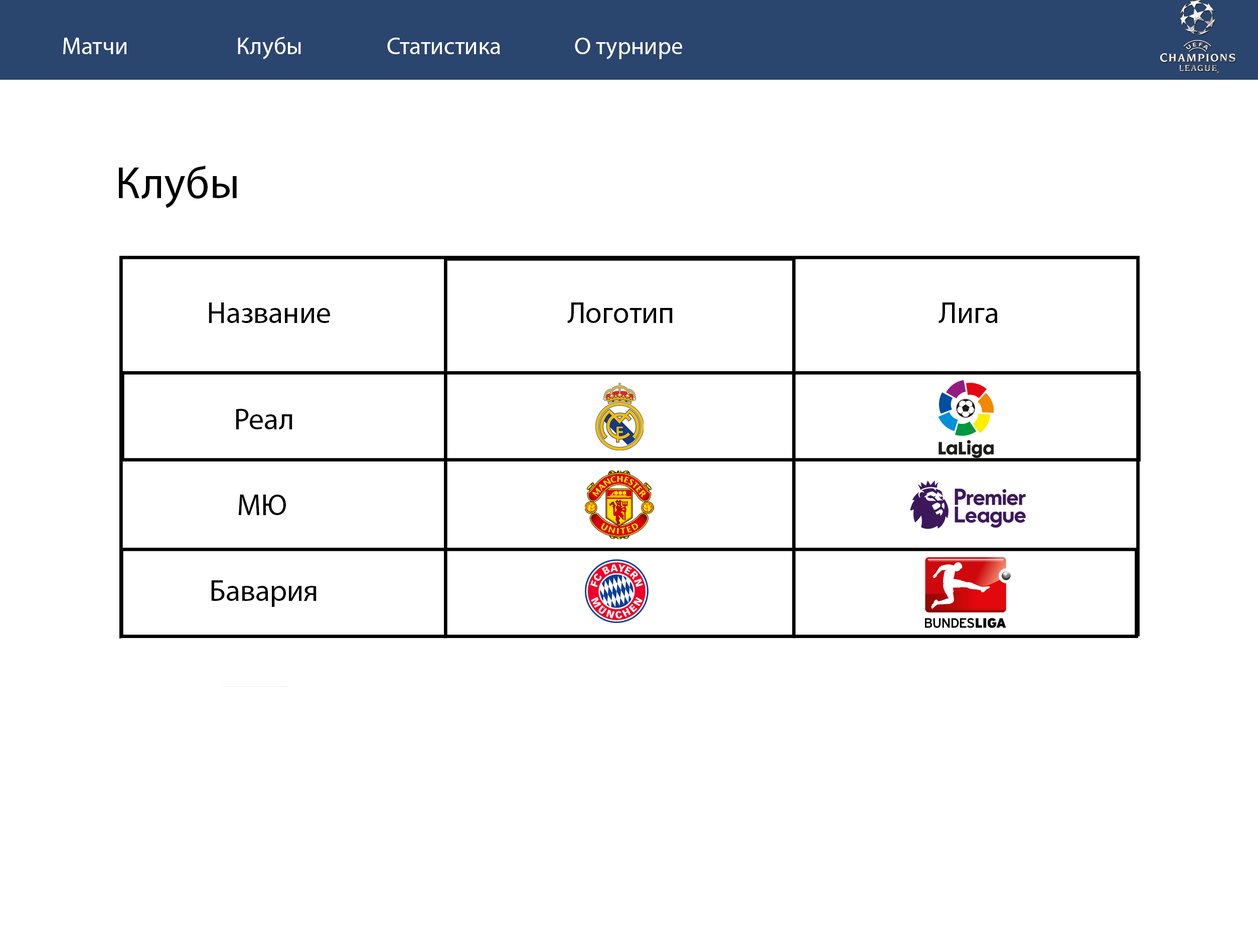
<style>
.page{position:relative;width:1258px;height:948px;background:#ffffff}
.page>*{position:absolute;margin:0}
.t1{font:24.1px "MyriadPro-Regular";color:#ffffff}
.t2{font:45.1px "MyriadPro-Regular";color:#000000}
.t3{font:30.1px "MyriadPro-Regular";color:#000000}
</style>
<div class="page">
<p class="t1" style="left:63px;top:38px;width:63px;height:16px">Матчи</p>
<p class="t1" style="left:238px;top:37px;width:63px;height:22px">Клубы</p>
<p class="t1" style="left:387px;top:38px;width:113px;height:16px">Статистика</p>
<p class="t1" style="left:575px;top:38px;width:107px;height:21px">О турнире</p>
<p class="t2" style="left:119px;top:166px;width:118px;height:42px">Клубы</p>
<p class="t3" style="left:209px;top:302px;width:121px;height:21px">Название</p>
<p class="t3" style="left:567px;top:302px;width:106px;height:21px">Логотип</p>
<p class="t3" style="left:938px;top:302px;width:60px;height:21px">Лига</p>
<p class="t3" style="left:236px;top:409px;width:56px;height:20px">Реал</p>
<p class="t3" style="left:238px;top:495px;width:48px;height:20px">МЮ</p>
<p class="t3" style="left:211px;top:580px;width:105px;height:27px">Бавария</p>
</div>
